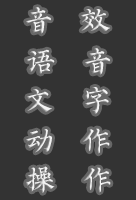
<style>
.page{position:relative;width:136px;height:200px;background:#333333}
.page>*{position:absolute;margin:0}
.t1{font:30px "AaYZQDBTBNon-CommercialUse";letter-spacing:0.9em;color:#f0f0f0}
</style>
<div class="page">
<p class="t1" style="left:26px;top:7px;width:84px;height:27px">音效</p>
<p class="t1" style="left:26px;top:48px;width:84px;height:27px">语音</p>
<p class="t1" style="left:27px;top:87px;width:82px;height:27px">文字</p>
<p class="t1" style="left:26px;top:128px;width:84px;height:26px">动作</p>
<p class="t1" style="left:26px;top:166px;width:85px;height:27px">操作</p>
</div>
